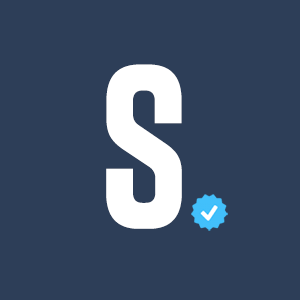
<style>
.page{position:relative;width:300px;height:300px;background:#2d3e58}
.page>*{position:absolute;margin:0}
.t1{font:292.5px "Tungsten-Semibold";color:#ffffff;scale:0.92 1}
</style>
<div class="page">
<p class="t1" style="left:106px;top:64px;width:76px;height:165px">s</p>
</div>
